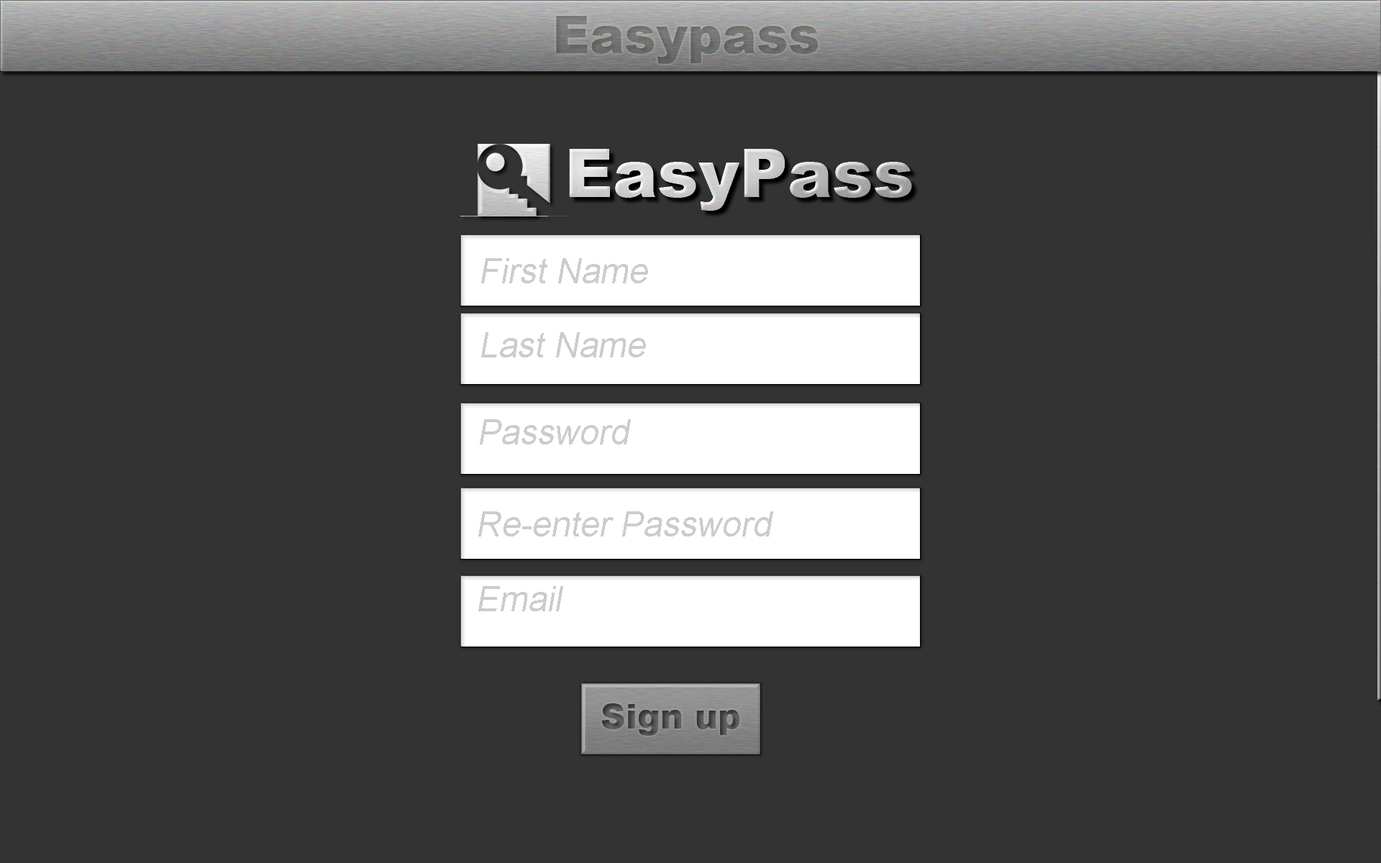
<style>
.page{position:relative;width:1381px;height:863px;background:#333333}
.page>*{position:absolute;margin:0}
.t1{font:34.5px "ArialMT";color:#cccccc;font-style:italic}
</style>
<div class="page">
<p class="t1" style="left:481px;top:258px;width:167px;height:25px">First Name</p>
<p class="t1" style="left:481px;top:332px;width:165px;height:26px">Last Name</p>
<p class="t1" style="left:480px;top:419px;width:151px;height:26px">Password</p>
<p class="t1" style="left:478px;top:511px;width:295px;height:26px">Re-enter Password</p>
<p class="t1" style="left:478px;top:586px;width:85px;height:25px">Email</p>
</div>
